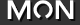
<style>
.page{position:relative;width:80px;height:25px;background:#333333}
.page>*{position:absolute;margin:0}
.t1{font:30px "EarthOrbiterExtra-Bold";color:#ffffff}
</style>
<div class="page">
<p class="t1" style="left:7px;top:0px;width:67px;height:21px">mon</p>
</div>
